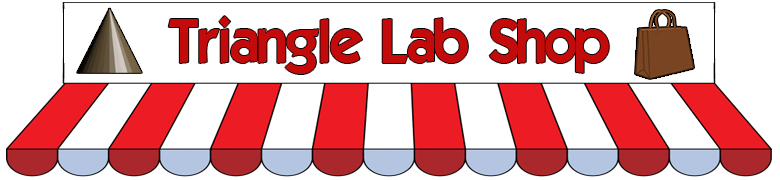
<style>
.page{position:relative;width:780px;height:180px;background:#ffffff}
.page>*{position:absolute;margin:0}
.t1{font:60px "ELEGANCE";color:#c30b0b}
</style>
<div class="page">
<p class="t1" style="left:168px;top:16px;width:441px;height:58px">Triangle Lab Shop</p>
</div>
